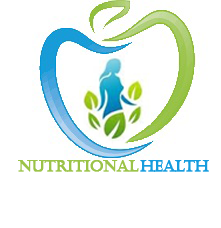
<style>
.page{position:relative;width:221px;height:228px;background:#ffffff}
.page>*{position:absolute;margin:0}
.t1{font:14.6px "Castellar";color:#9bc348;font-weight:bold}
.t2{font:14.6px "Castellar";color:#159cde;font-weight:bold}
</style>
<div class="page">
<p class="t1" style="left:18px;top:160px;width:121px;height:12px">nutritional</p>
<p class="t2" style="left:140px;top:160px;width:69px;height:12px">health</p>
</div>
